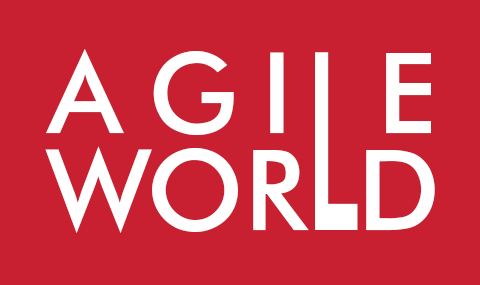
<style>
.page{position:relative;width:480px;height:285px;background:#c82031}
.page>*{position:absolute;margin:0}
.t1{font:130px "Futura-Normal";letter-spacing:0.155em;color:#ffffff;text-transform:uppercase}
.t2{font:287.3px "Futura-Normal";letter-spacing:0.155em;color:#ffffff;text-transform:uppercase;scale:0.45 1}
.t3{font:130px "Futura-Normal";color:#ffffff;text-transform:uppercase}
</style>
<div class="page">
<p class="t1" style="left:46px;top:49px;width:385px;height:86px">AGi e</p>
<p class="t2" style="left:315px;top:52px;width:43px;height:178px">L</p>
<p class="t3" style="left:45px;top:146px;width:390px;height:87px">Wor d</p>
</div>
